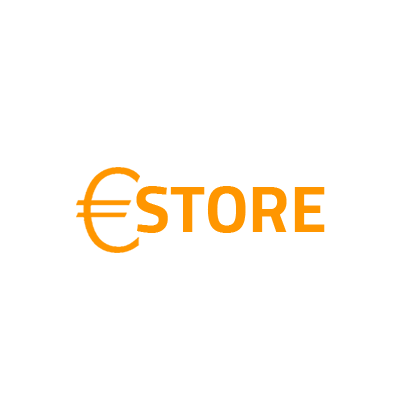
<style>
.page{position:relative;width:400px;height:400px;background:#ffffff}
.page>*{position:absolute;margin:0}
.t1{font:66.7px "Cairo-Bold";color:#ff9600;text-transform:uppercase}
</style>
<div class="page">
<p class="t1" style="left:136px;top:186px;width:189px;height:47px">store</p>
</div>
